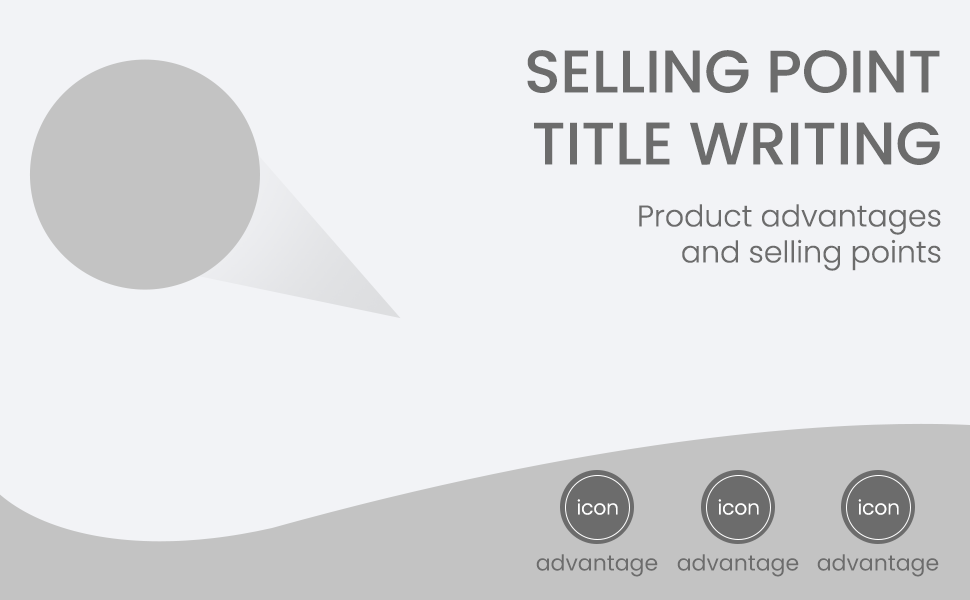
<style>
.page{position:relative;width:970px;height:600px;background:#f2f3f6}
.page>*{position:absolute;margin:0}
.t1{font:60px "Poppins-Medium";color:#6c6c6c;text-transform:uppercase}
.t2{font:30px "Poppins-Light";color:#6c6c6c}
.t3{font:20px "Poppins-Light";color:#ffffff}
.t4{font:22px "Poppins-Regular";color:#6c6c6c}
</style>
<div class="page">
<p class="t1" style="left:527px;top:50px;width:413px;height:115px;text-align:right">Selling point<br>title writing</p>
<p class="t2" style="left:639px;top:204px;width:302px;height:67px;text-align:right">Product advantages<br>and selling points</p>
<p class="t3" style="left:577px;top:499px;width:41px;height:16px">icon</p>
<p class="t3" style="left:718px;top:499px;width:41px;height:16px">icon</p>
<p class="t3" style="left:858px;top:499px;width:41px;height:16px">icon</p>
<p class="t4" style="left:536px;top:554px;width:122px;height:23px">advantage</p>
<p class="t4" style="left:677px;top:554px;width:122px;height:23px">advantage</p>
<p class="t4" style="left:817px;top:554px;width:122px;height:23px">advantage</p>
</div>
